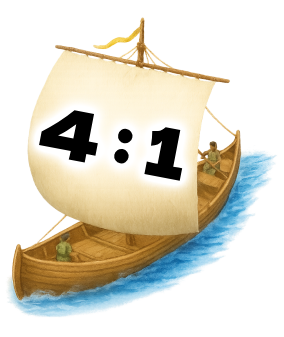
<style>
.page{position:relative;width:284px;height:337px;background:#ffffff}
.page>*{position:absolute;margin:0}
.t1{font:68px "DelaGothicOne-Regular";color:#000000}
</style>
<div class="page">
<p class="t1" style="left:39px;top:110px;width:144px;height:71px;rotate:11deg">4 : 1</p>
</div>
